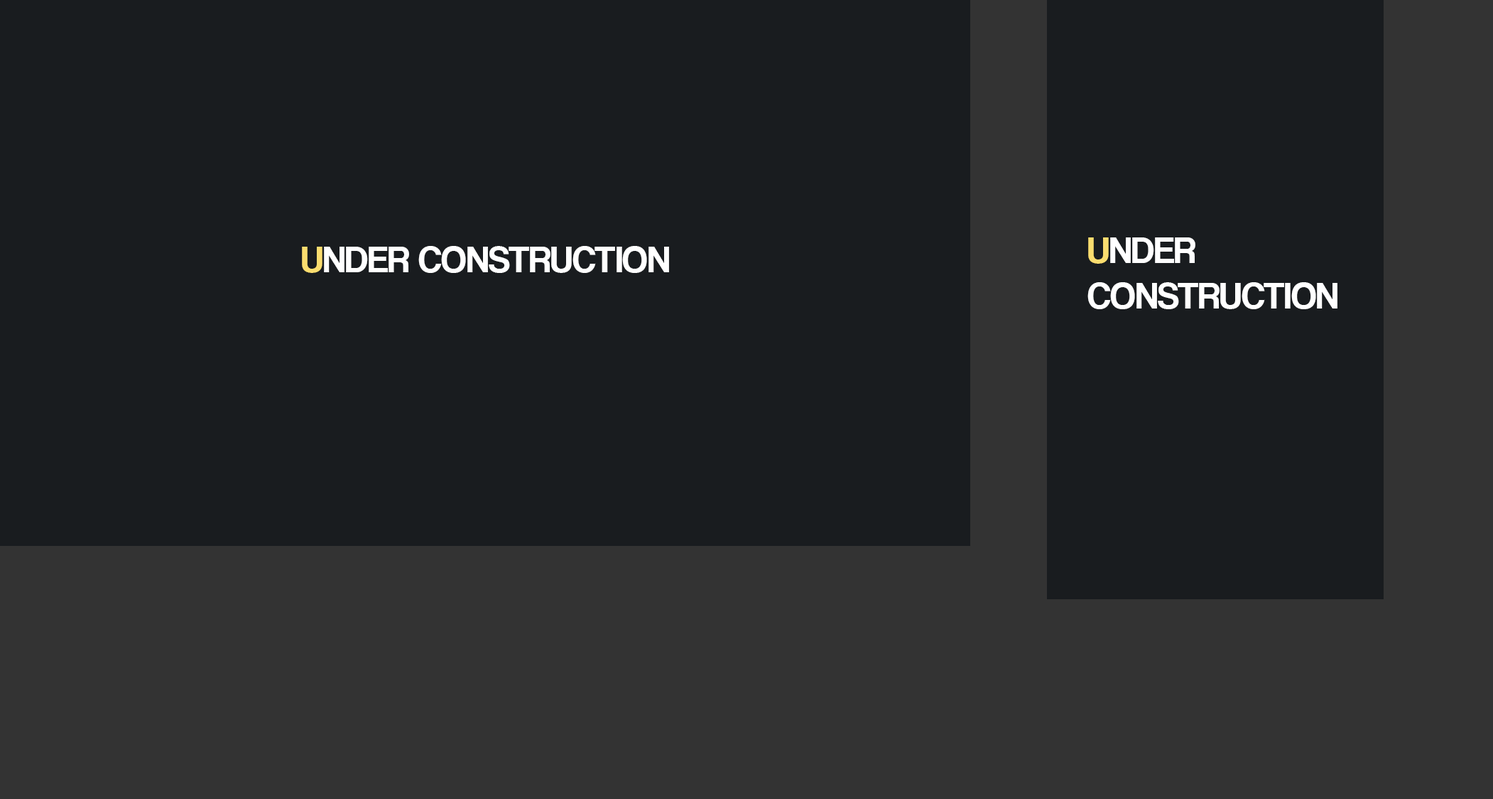
<style>
.page{position:relative;width:1493px;height:799px;background:#191c1f}
.page>*{position:absolute;margin:0}
.t1{font:37.7px "CoolveticaRg-Regular";color:#ffffff}
.t2{font:37.7px "CoolveticaRg-Regular";color:#fbdd6f}
</style>
<div class="page">
<p class="t1" style="left:302px;top:246px;width:367px;height:27px"><span class="t2">U</span>NDER CONSTRUCTION</p>
<p class="t1" style="left:1088px;top:237px;width:250px;height:72px"><span class="t2">U</span>NDER <br>CONSTRUCTION</p>
</div>
